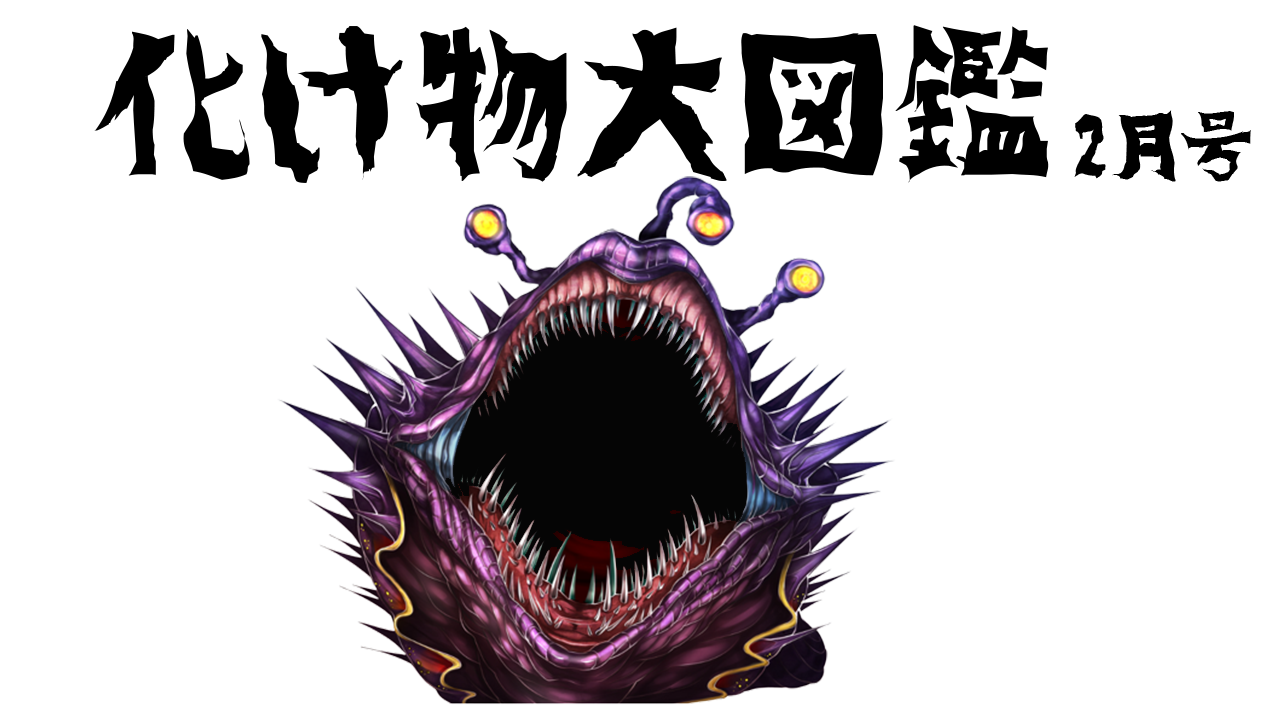
<style>
.page{position:relative;width:1280px;height:720px;background:#ffffff}
.page>*{position:absolute;margin:0}
.t1{font:160px "hakidame";color:#000000}
.t2{font:72px "hakidame";color:#000000}
</style>
<div class="page">
<p class="t1" style="left:94px;top:25px;width:955px;height:158px">化け物大図鑑</p>
<p class="t2" style="left:1074px;top:110px;width:177px;height:72px">2月号</p>
</div>
